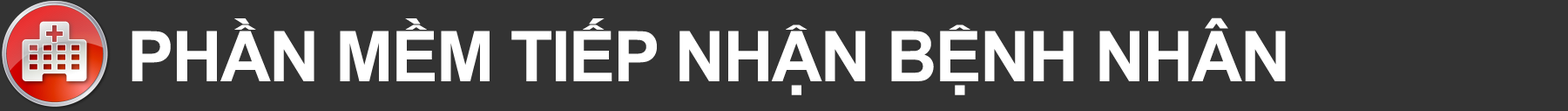
<style>
.page{position:relative;width:1568px;height:111px;background:#333333}
.page>*{position:absolute;margin:0}
.t1{font:69.7px "Arial-BoldMT";letter-spacing:-0.025em;color:#ffffff}
</style>
<div class="page">
<p class="t1" style="left:132px;top:17px;width:1154px;height:78px">PHẦN MỀM TIẾP NHẬN BỆNH NHÂN</p>
</div>
